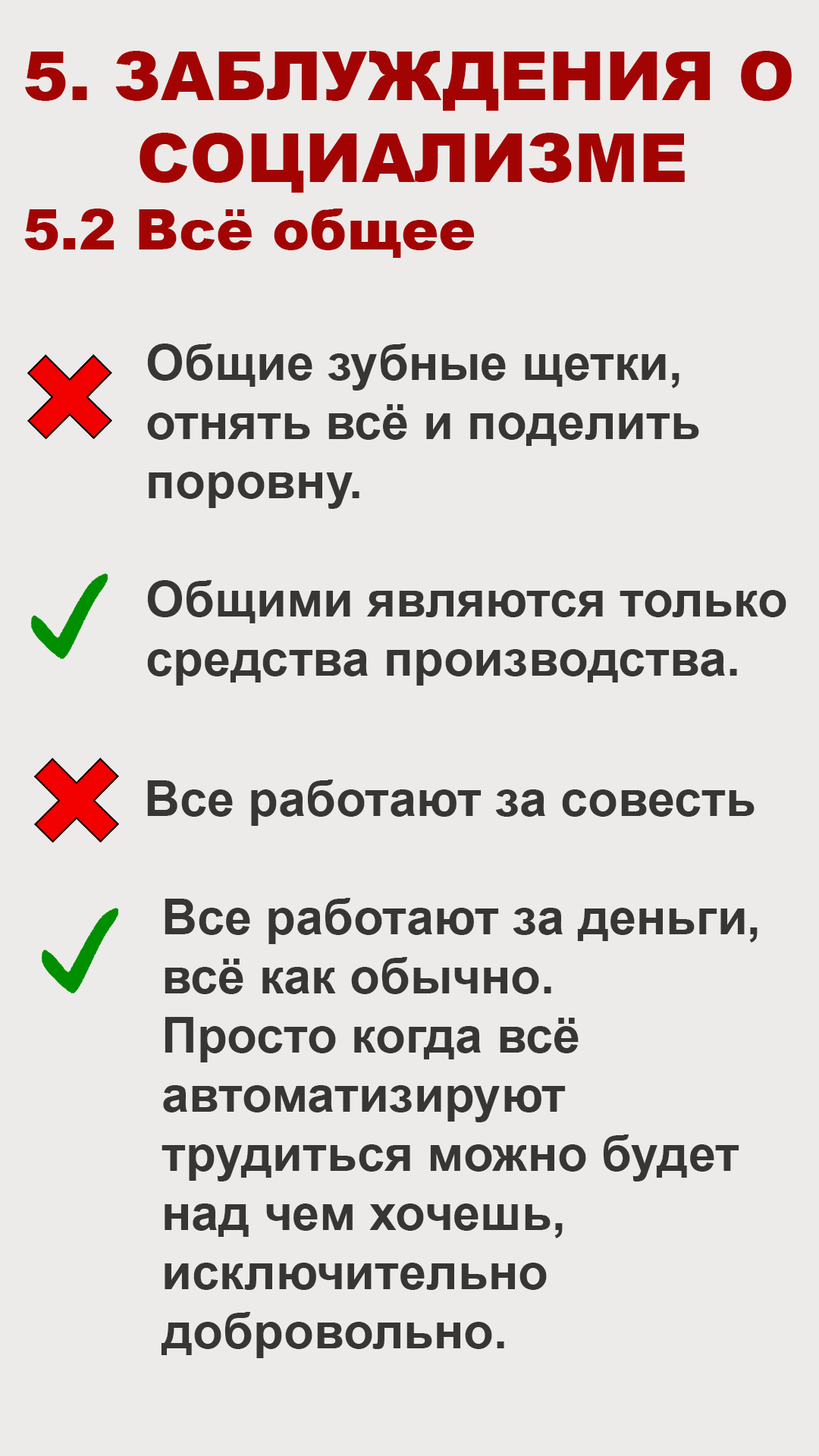
<style>
.page{position:relative;width:819px;height:1456px;background:#ecebe9}
.page>*{position:absolute;margin:0}
.t1{font:68.2px "Arial-Black";color:#a20403}
.t2{font:56.1px "Arial-Black";color:#a20403}
.t3{font:49.3px "Arial-BoldMT";color:#373634}
</style>
<div class="page">
<p class="t1" style="left:24px;top:51px;width:768px;height:207px">5. ЗАБЛУЖДЕНИЯ О <br>     СОЦИАЛИЗМЕ<br><span class="t2">5.2 Всё общее</span></p>
<p class="t3" style="left:147px;top:344px;width:639px;height:342px">Общие зубные щетки,<br>отнять всё и поделить<br>поровну.<br><br>Общими являются только <br>средства производства.</p>
<p class="t3" style="left:147px;top:780px;width:608px;height:46px">Все работают за совесть</p>
<p class="t3" style="left:161px;top:898px;width:597px;height:460px">Все работают за деньги,<br>всё как обычно.<br>Просто когда всё <br>автоматизируют<br>трудиться можно будет<br>над чем хочешь, <br>исключительно<br>добровольно.</p>
</div>
